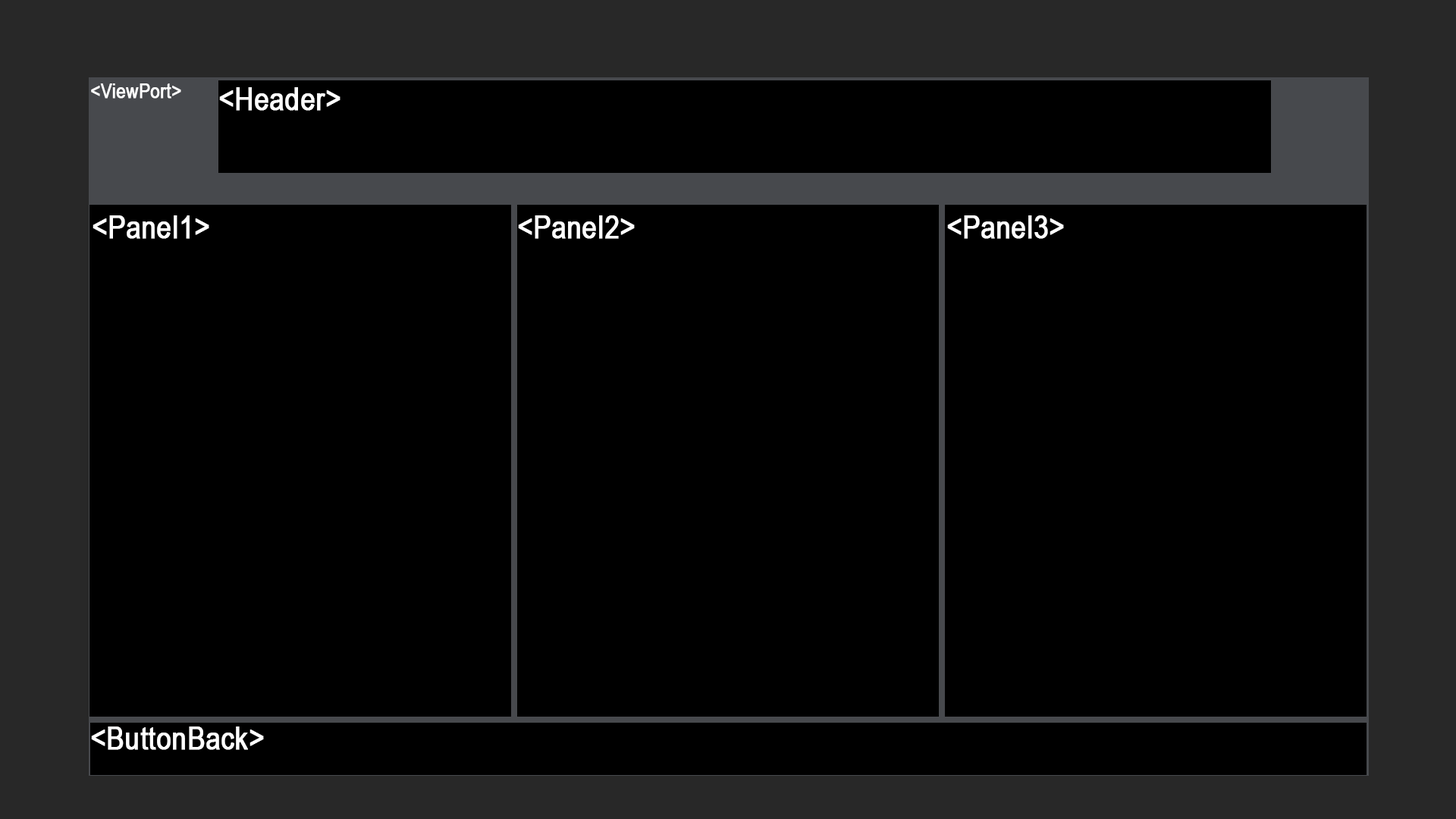
<style>
.page{position:relative;width:1456px;height:819px;background:#000000}
.page>*{position:absolute;margin:0}
.t1{font:20.3px "ArialNarrow";color:#ffffff;font-weight:bold}
.t2{font:31.9px "ArialNarrow";color:#ffffff;font-weight:bold}
</style>
<div class="page">
<p class="t1" style="left:91px;top:83px;width:90px;height:16px">&lt;ViewPort&gt;</p>
<p class="t2" style="left:219px;top:87px;width:121px;height:24px">&lt;Header&gt;</p>
<p class="t2" style="left:93px;top:215px;width:116px;height:24px">&lt;Panel1&gt;</p>
<p class="t2" style="left:518px;top:215px;width:117px;height:24px">&lt;Panel2&gt;</p>
<p class="t2" style="left:947px;top:215px;width:117px;height:24px">&lt;Panel3&gt;</p>
<p class="t2" style="left:91px;top:726px;width:173px;height:24px">&lt;ButtonBack&gt;</p>
</div>
